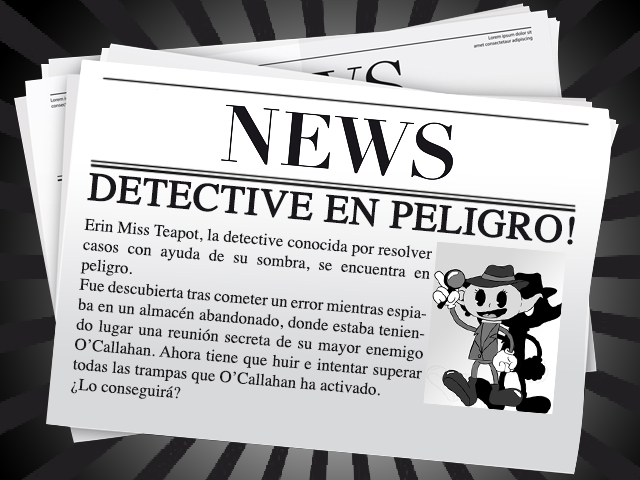
<style>
.page{position:relative;width:640px;height:480px}
.page>*{position:absolute;margin:0}
.t1{font:39.5px "Times-Roman";color:#19171c;text-transform:uppercase;font-weight:bold}
.t2{font:16.7px "Times-Roman";color:#19171c}
</style>
<div class="page">
<p class="t1" style="left:87px;top:172px;width:488px;height:73px;rotate:5deg">detective en peligro!</p>
<p class="t2" style="left:71px;top:218px;width:361px;height:181px;text-align:justify;rotate:5deg">Erin Miss Teapot, la detective conocida por resolver casos con ayuda de su sombra, se encuentra en peligro.<br>Fue descubierta tras cometer un error mientras espiaba en un almacén abandonado, donde estaba teniendo lugar una reunión secreta de su mayor enemigo O’Callahan. Ahora tiene que huir e intentar superar todas las trampas que O’Callahan ha activado. <br>¿Lo conseguirá?</p>
</div>
